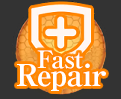
<style>
.page{position:relative;width:121px;height:99px;background:#333333}
.page>*{position:absolute;margin:0}
.t1{font:30px/18px "RyuminPro-ExBold";letter-spacing:-0.04em;color:#ffffff}
.t2{font:24px/18px "RyuminPro-ExBold";letter-spacing:-0.04em;color:#ffffff}
</style>
<div class="page">
<p class="t1" style="left:17px;top:50px;width:89px;height:41px;text-align:center"><span class="t2">Fast<br></span>Repair</p>
</div>
